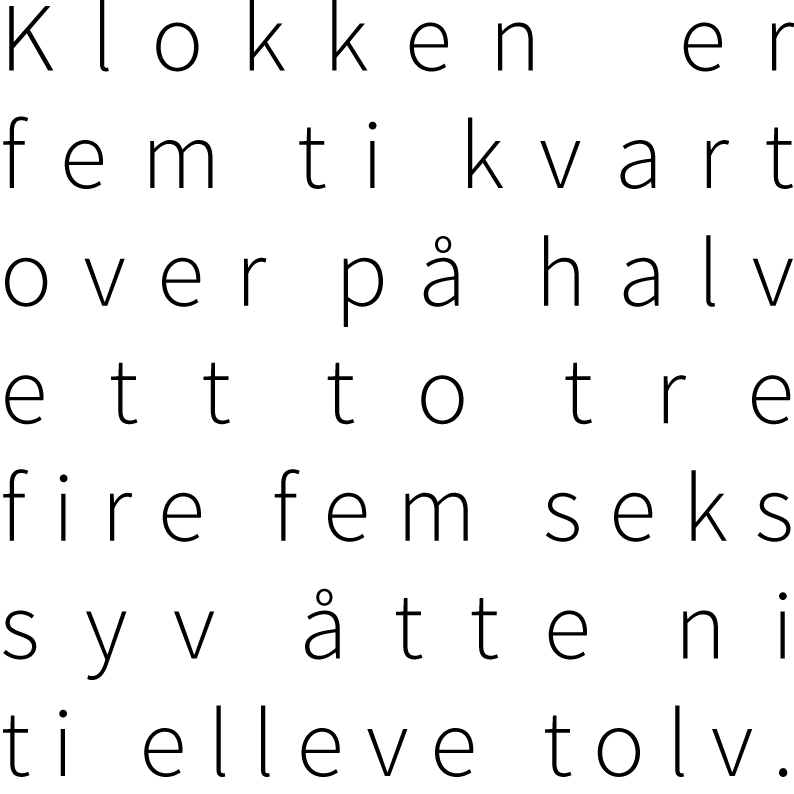
<style>
.page{position:relative;width:794px;height:794px;background:#ffffff}
.page>*{position:absolute;margin:0}
.t1{font:98px "SourceSansPro-Light";color:#000000}
</style>
<div class="page">
<p class="t1" style="left:3px;top:0px;width:792px;height:777px;text-align:justify">Klokken er<br>fem ti kvart<br>over på halv<br>ett to tre<br>fire fem seks<br>syv åtte ni<br>ti elleve tolv.</p>
</div>
